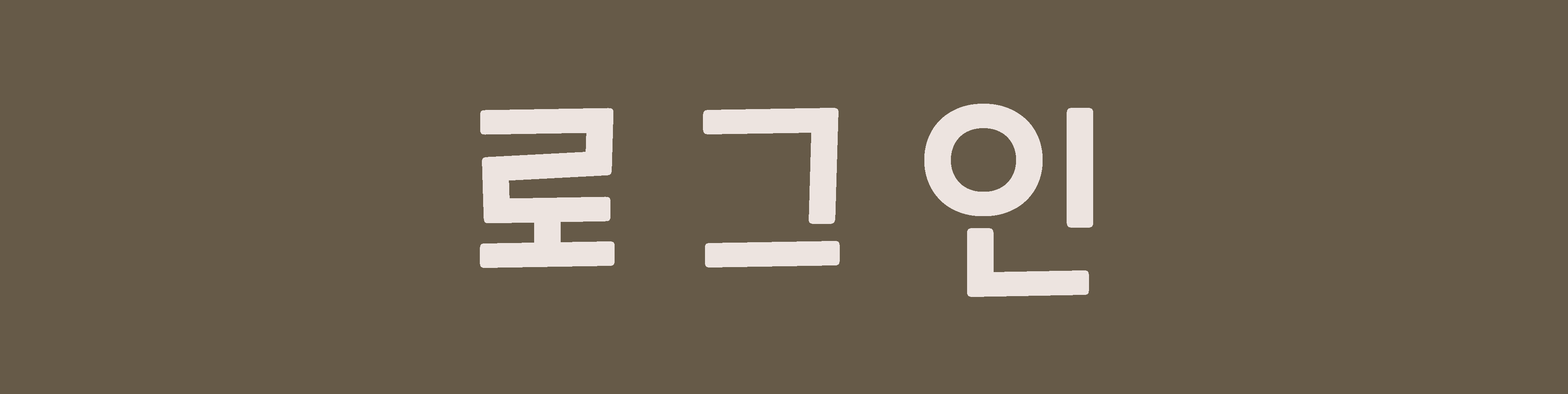
<style>
.page{position:relative;width:1568px;height:394px;background:#665a48}
.page>*{position:absolute;margin:0}
.t1{font:207.4px "CookieRun-Regular";color:#ede4e0}
</style>
<div class="page">
<p class="t1" style="left:480px;top:104px;width:613px;height:193px">로 그 인</p>
</div>
